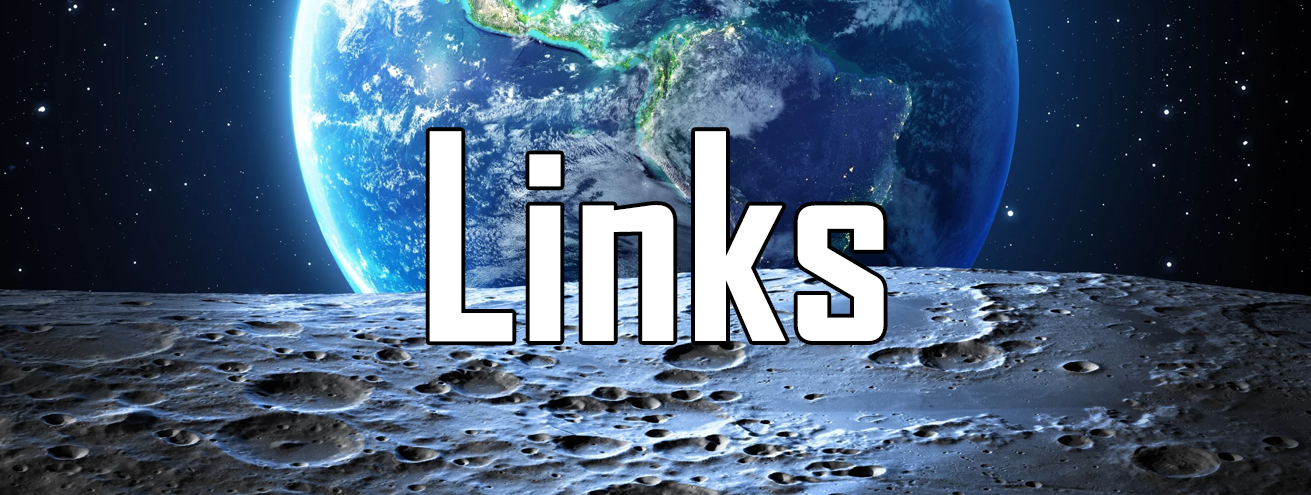
<style>
.page{position:relative;width:1311px;height:495px}
.page>*{position:absolute;margin:0}
.t1{font:274.1px "AgencyFB-Bold";color:#ffffff}
</style>
<div class="page">
<p class="t1" style="left:429px;top:131px;width:455px;height:211px">Links</p>
</div>
